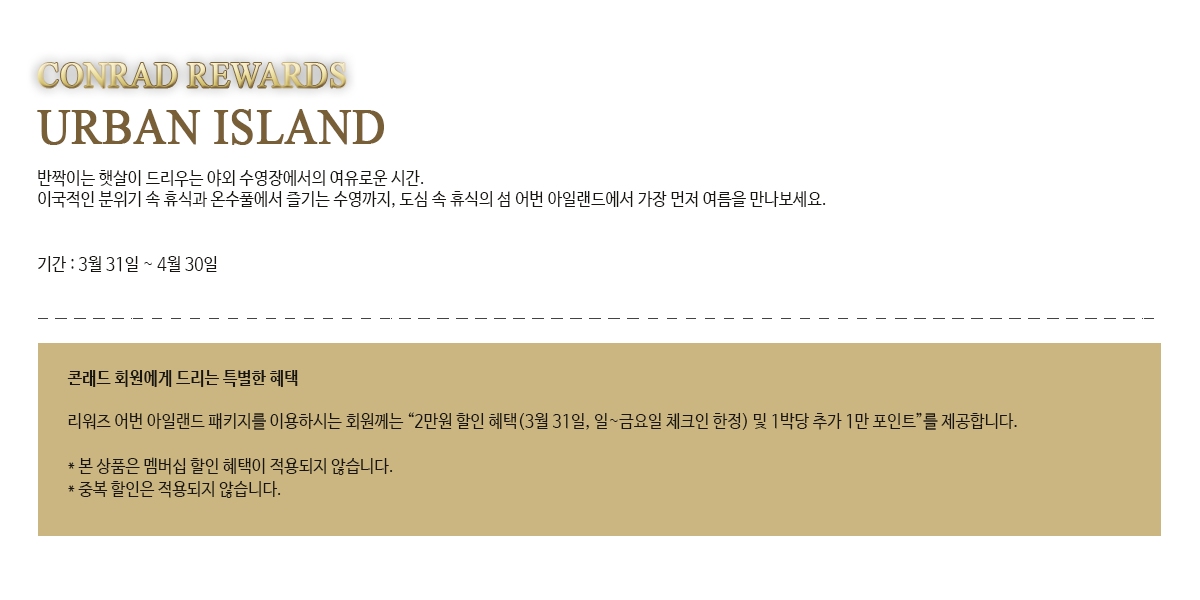
<style>
.page{position:relative;width:1200px;height:600px;background:#ffffff}
.page>*{position:absolute;margin:0}
.t1{font:36px "TimesNewRomanPSMT";font-weight:bold;scale:0.89 1}
.t2{font:50px "TimesNewRomanPSMT";color:#785f37;font-weight:bold;scale:0.9 1}
.t3{font:18px "NanumBarunGothic";color:#181510;scale:0.9 1}
.t4{font:18px "NanumBarunGothicBold";color:#181510;scale:0.9 1}
.t5{font:18px/23.2px "NanumBarunGothic";color:#181510;scale:0.9 1}
</style>
<div class="page">
<p class="t1" style="left:38px;top:63px;width:308px;height:25px">CONRAD REWARDS</p>
<p class="t2" style="left:37px;top:109px;width:347px;height:36px">URBAN ISLAND</p>
<p class="t3" style="left:38px;top:169px;width:788px;height:103px">반짝이는 햇살이 드리우는 야외 수영장에서의 여유로운 시간.<br>이국적인 분위기 속 휴식과 온수풀에서 즐기는 수영까지, 도심 속 휴식의 섬 어번 아일랜드에서 가장 먼저 여름을 만나보세요.<br><br><br>기간 : 3월 31일 ~ 4월 30일</p>
<p class="t3" style="left:67px;top:370px;width:950px;height:128px"><span class="t4">콘래드 회원에게 드리는 특별한 혜택<br></span><br>리워즈 어번 아일랜드 패키지를 이용하시는 회원께는 “2만원 할인 혜택(3월 31일, 일~금요일 체크인 한정) 및 1박당 추가 1만 포인트”를 제공합니다.<br><br><span class="t5">* 본 상품은 멤버십 할인 혜택이 적용되지 않습니다. <br>* 중복 할인은 적용되지 않습니다.</span></p>
</div>
